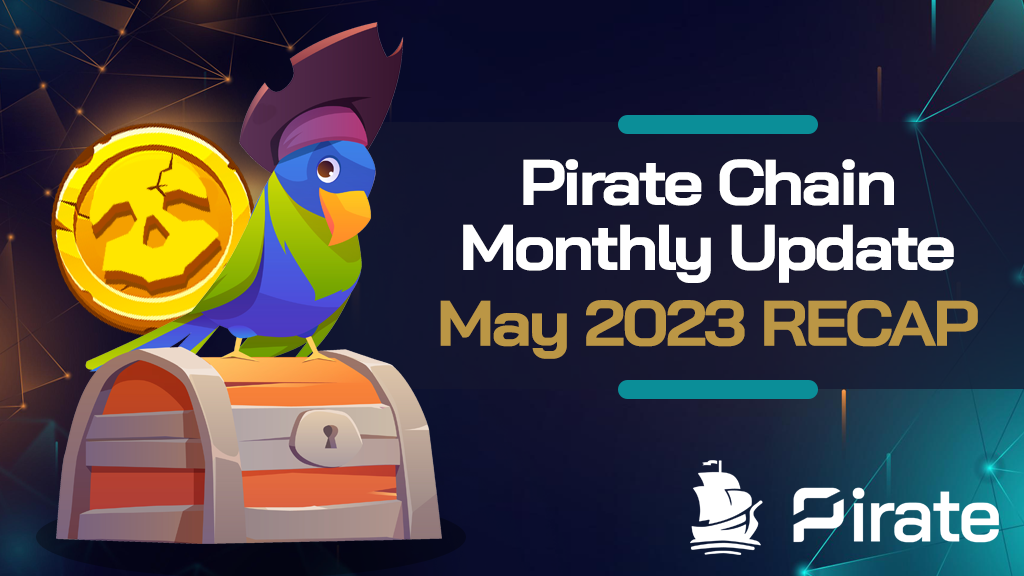
<style>
.page{position:relative;width:1024px;height:576px}
.page>*{position:absolute;margin:0}
.t1{font:64.1px "BaiJamjuree-Bold";letter-spacing:-0.05em;color:#ffffff;scale:1.1 1}
.t2{font:64.1px "BaiJamjuree-Bold";letter-spacing:-0.05em;color:#bb9645;scale:1.1 1}
.t3{font:64.1px "BaiJamjuree-Bold";letter-spacing:-0.05em;color:#bb9645;text-transform:uppercase;scale:1.1 1}
</style>
<div class="page">
<p class="t1" style="left:523px;top:159px;width:371px;height:47px">Pirate Chain</p>
<p class="t1" style="left:463px;top:224px;width:491px;height:59px">Monthly Update</p>
<p class="t2" style="left:440px;top:300px;width:538px;height:59px">May 2023 <span class="t3">recap</span></p>
</div>
